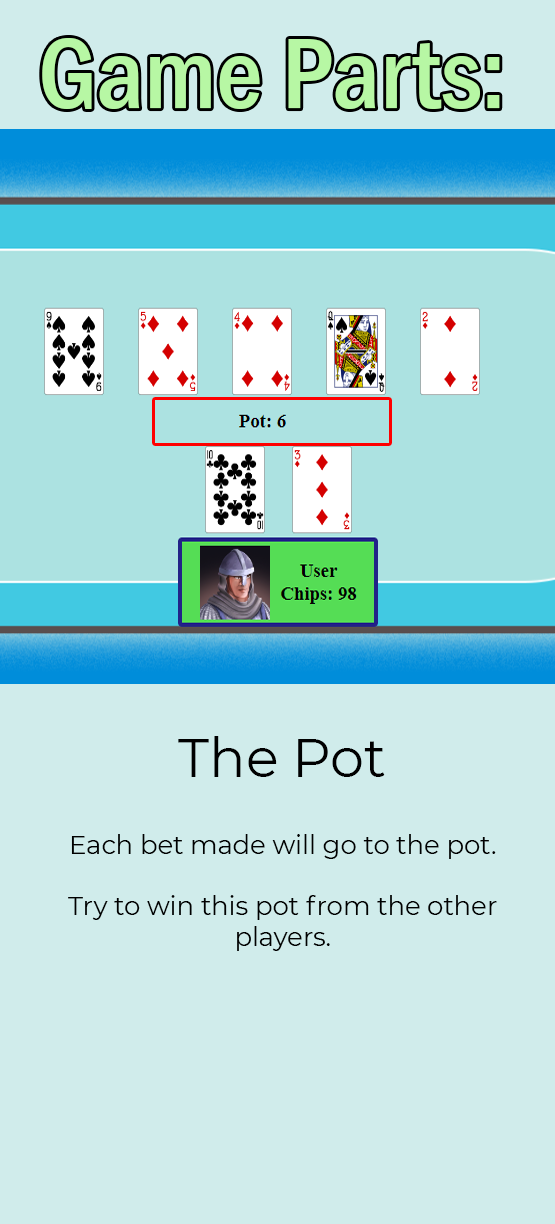
<style>
.page{position:relative;width:555px;height:1224px;background:#d0eceb}
.page>*{position:absolute;margin:0}
.t1{font:103.5px "FranklinGothic-MediumCond";color:#b7f7a4}
.t2{font:53.8px "Montserrat-Regular";color:#000000}
.t3{font:25.7px "Montserrat-Regular";color:#000000}
</style>
<div class="page">
<p class="t1" style="left:42px;top:38px;width:458px;height:71px">Game Parts:</p>
<p class="t2" style="left:178px;top:736px;width:207px;height:41px">The Pot</p>
<p class="t3" style="left:68px;top:834px;width:429px;height:117px;text-align:center">Each bet made will go to the pot.<br><br>Try to win this pot from the other players.</p>
</div>
